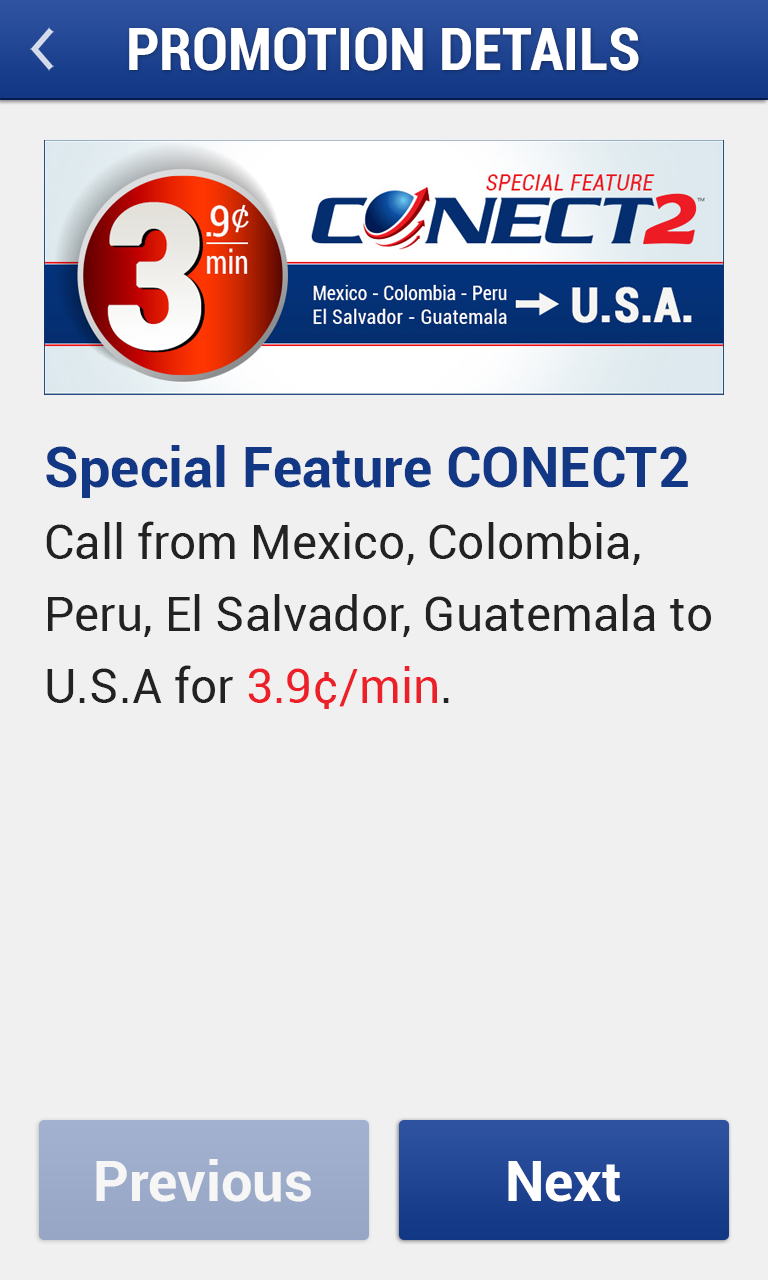
<style>
.page{position:relative;width:768px;height:1280px;background:#f0f0f0}
.page>*{position:absolute;margin:0}
.t1{font:60px "Roboto-BoldCondensed";color:#ffffff}
.t2{font:48px/72px "Roboto-Regular";color:#222222}
.t3{font:56px/72px "Roboto-Bold";color:#123785}
.t4{font:48px/72px "Roboto-Regular";color:#ec2028}
.t5{font:56px "Roboto-Bold";color:#ffffff}
</style>
<div class="page">
<p class="t1" style="left:129px;top:27px;width:510px;height:44px">PROMOTION DETAILS</p>
<p class="t2" style="left:46px;top:445px;width:665px;height:264px"><span class="t3">Special Feature CONECT2<br></span>Call from Mexico, Colombia, Peru, El Salvador, Guatemala to U.S.A for <span class="t4">3.9¢/min</span>.</p>
<p class="t5" style="left:96px;top:1159px;width:215px;height:43px">Previous</p>
<p class="t5" style="left:508px;top:1161px;width:112px;height:41px">Next</p>
</div>
